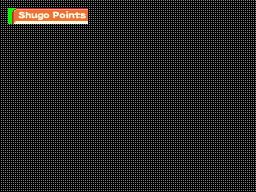
<style>
.page{position:relative;width:256px;height:192px;background:#000000}
.page>*{position:absolute;margin:0}
.t1{font:11.4px "DFTFLeiShoStd-W5";letter-spacing:-0.02em;color:#f8f8e0;scale:0.91 1}
</style>
<div class="page">
<p class="t1" style="left:18px;top:11px;width:68px;height:9px">Shugo Points</p>
</div>
